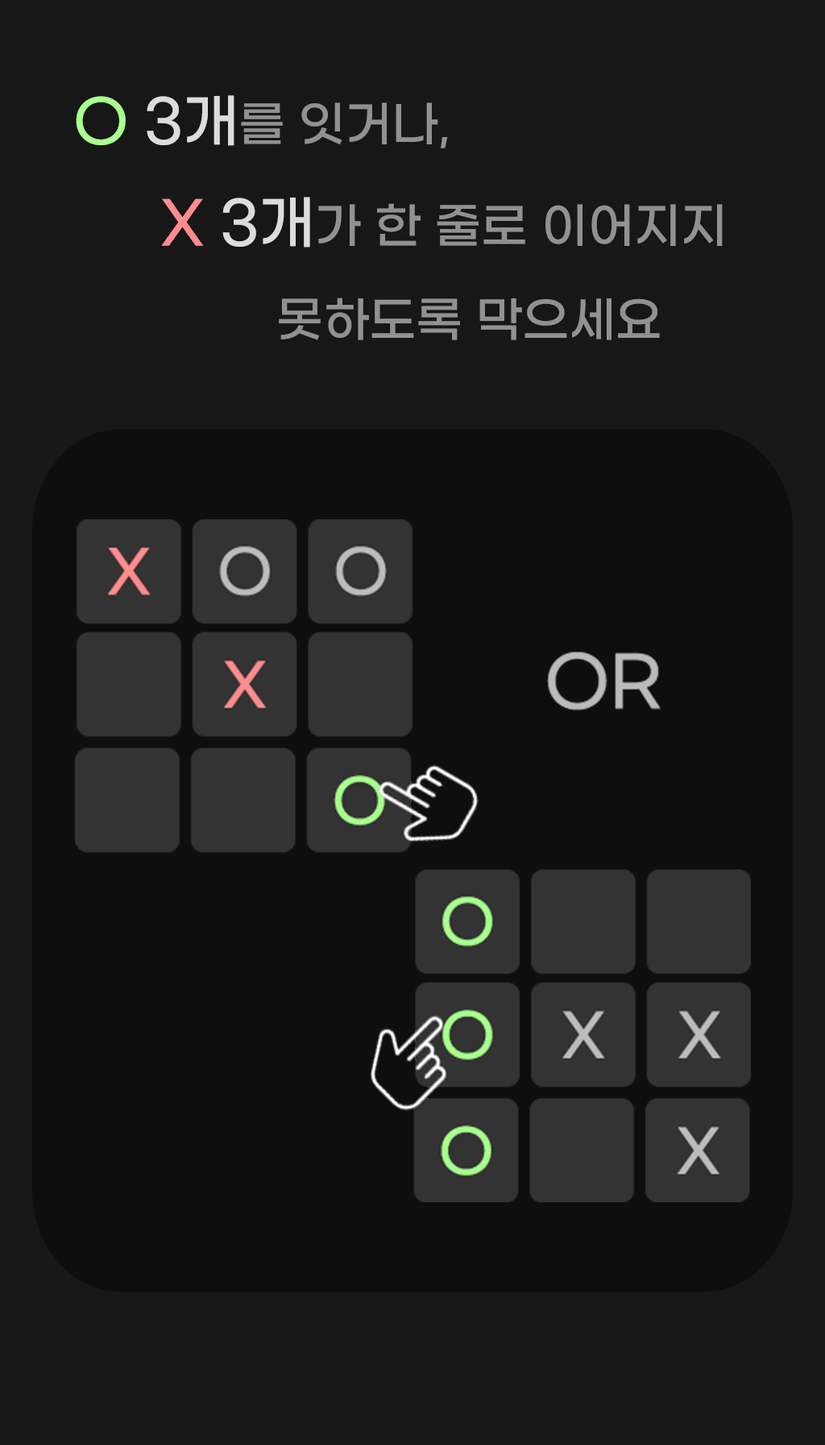
<style>
.page{position:relative;width:825px;height:1445px;background:#171717}
.page>*{position:absolute;margin:0}
.t1{font:48.4px "GmarketSansTTFMedium";color:#919191}
.t2{font:58px "GmarketSansTTFMedium";color:#aaff8f}
.t3{font:58px "GmarketSansTTFMedium";color:#dcdcdc}
.t4{font:58px "GmarketSansTTFMedium";color:#ff8c8c}
</style>
<div class="page">
<p class="t1" style="left:76px;top:95px;width:647px;height:245px"><span class="t2">O </span><span class="t3">3개</span>를 잇거나,<br><span class="t4">   X </span><span class="t3">3개</span>가 한 줄로 이어지지 <br>       못하도록 막으세요</p>
</div>
